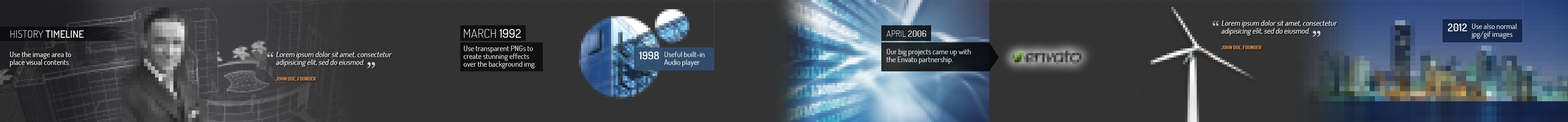
<style>
.page{position:relative;width:1568px;height:122px;background:#333333}
.page>*{position:absolute;margin:0}
.t1{font:12.1px "Dosis-ExtraLight";letter-spacing:0.01em;color:#ffffff;text-transform:uppercase}
.t2{font:12.1px "Dosis-Medium";letter-spacing:0.01em;color:#ffffff;text-transform:uppercase}
.t3{font:18.4px "Georgia";color:#bcbcbc}
.t4{font:7.4px/7.8px "Dosis-Medium";color:#ffffff;font-style:italic}
.t5{font:4.6px/7.8px "Dosis-ExtraBold";color:#e08a45}
.t6{font:10.6px "Dosis-SemiBold";letter-spacing:0.01em;color:#ffffff;text-transform:uppercase}
.t7{font:7.4px/7.8px "Dosis-Medium";color:#ffffff}
.t8{font:10.1px "Dosis-Medium";letter-spacing:0.01em;color:#ffffff;text-transform:uppercase}
.t9{font:10.1px "Dosis-ExtraLight";letter-spacing:0.01em;color:#ffffff;text-transform:uppercase}
.t10{font:8.8px "Dosis-ExtraLight";letter-spacing:0.01em;color:#ffffff;text-transform:uppercase}
.t11{font:8.8px "Dosis-Medium";letter-spacing:0.01em;color:#ffffff;text-transform:uppercase}
.t12{font:23.6px "Georgia";color:#d8d8db}
.t13{font:18.4px "Georgia";color:#c0c0c1}
.t14{font:23.6px "Georgia";color:#d7d7d7}
</style>
<div class="page">
<p class="t1" style="left:464px;top:29px;width:57px;height:9px">MARCH <span class="t2">1992</span></p>
<p class="t3" style="left:1212px;top:21px;width:7px;height:5px">“</p>
<p class="t4" style="left:1221px;top:20px;width:116px;height:30px">Lorem ipsum dolor sit amet, consectetur adipisicing elit, sed do eiusmod.<br><br><span class="t5">JOHN DOE, FOUNDER</span></p>
<p class="t6" style="left:1448px;top:24px;width:19px;height:7px">2012</p>
<p class="t7" style="left:1471px;top:24px;width:46px;height:15px;opacity:0.9">Use also normal<br>jpg/gif images</p>
<p class="t8" style="left:10px;top:30px;width:74px;height:8px"><span class="t9">HISTORY </span>TIMELINE</p>
<p class="t10" style="left:886px;top:30px;width:41px;height:7px">APRIL <span class="t11">2006</span></p>
<p class="t12" style="left:1313px;top:31px;width:7px;height:6px;rotate:180deg">“</p>
<p class="t7" style="left:10px;top:52px;width:61px;height:15px">Use the image area to place visual contents.</p>
<p class="t13" style="left:267px;top:52px;width:6px;height:5px">“</p>
<p class="t4" style="left:276px;top:52px;width:116px;height:29px">Lorem ipsum dolor sit amet, consectetur adipisicing elit, sed do eiusmod.<br><br><span class="t5">JOHN DOE, FOUNDER</span></p>
<p class="t7" style="left:463px;top:46px;width:73px;height:23px;opacity:0.9">Use transparent PNGs to<br>create stunning effects<br>over the background img.</p>
<p class="t6" style="left:639px;top:52px;width:20px;height:7px">1998</p>
<p class="t7" style="left:664px;top:52px;width:41px;height:15px;opacity:0.9">Useful built-in<br>Audio player</p>
<p class="t7" style="left:886px;top:49px;width:85px;height:15px;opacity:0.9">Our big projects came up with the Envato partnership.</p>
<p class="t14" style="left:367px;top:62px;width:8px;height:6px;rotate:180deg">“</p>
</div>
